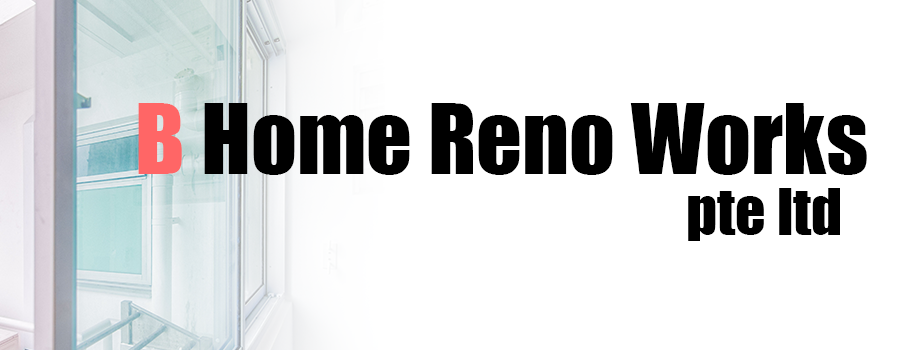
<style>
.page{position:relative;width:900px;height:350px;background:#ffffff}
.page>*{position:absolute;margin:0}
.t1{font:90px "Impact";color:#000000}
.t2{font:90px "Impact";color:#ff6666}
.t3{font:60px "Impact";color:#000000}
</style>
<div class="page">
<p class="t1" style="left:138px;top:103px;width:729px;height:72px"><span class="t2">B </span>Home Reno Works</p>
<p class="t3" style="left:688px;top:188px;width:152px;height:53px">pte ltd</p>
</div>
